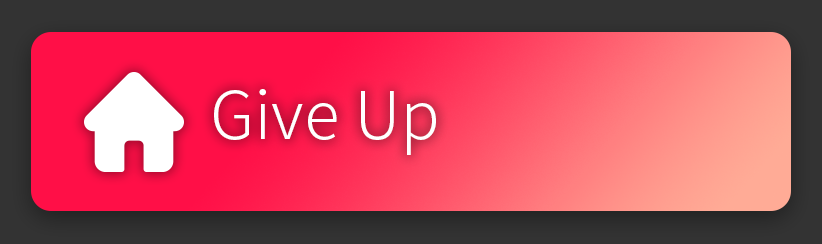
<style>
.page{position:relative;width:822px;height:244px}
.page>*{position:absolute;margin:0}
.t1{font:66px "NotoSansCJKkr-Light";color:#ffffff}
</style>
<div class="page">
<p class="t1" style="left:214px;top:89px;width:222px;height:66px">Give Up</p>
</div>
